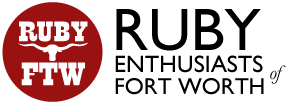
<style>
.page{position:relative;width:300px;height:105px;background:#ffffff}
.page>*{position:absolute;margin:0}
.t1{font:24px/22px "GillSans";color:#000000}
.t2{font:60px/17px "GillSans";color:#000000}
.t3{font:20px/21px "Baskerville-Italic";letter-spacing:-0.04em;color:#000000}
.t4{font:23px/22px "GillSans";color:#000000}
</style>
<div class="page">
<p class="t1" style="left:115px;top:9px;width:171px;height:86px"><span class="t2">RUBY<br></span>ENTHUSIASTS <span class="t3">of  <br></span><span class="t4">FORT WORTH</span></p>
</div>
